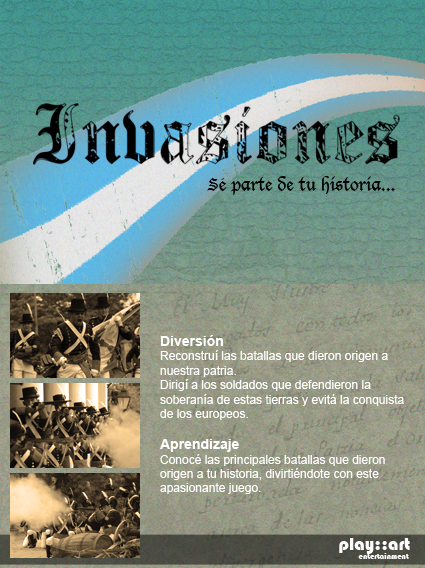
<style>
.page{position:relative;width:425px;height:568px}
.page>*{position:absolute;margin:0}
.t1{font:12px "ArialMT";color:#ffffff}
.t2{font:14px "Arial-BoldMT";color:#ffffff}
.t3{font:8px "Bauhaus93";color:#ffffff}
.t4{font:18px "Bauhaus93";color:#ffffff}
</style>
<div class="page">
<p class="t1" style="left:160px;top:335px;width:244px;height:159px"><span class="t2">Diversión<br></span>Reconstruí las batallas que dieron origen a <br>nuestra patria. <br>Dirigí a los soldados que defendieron la <br>soberanía de estas tierras y evitá la conquista<br>de los europeos. <br><br><span class="t2">Aprendizaje<br></span>Conocé las principales batallas que dieron <br>origen a tu historia, divirtiéndote con este <br>apasionante juego.</p>
<p class="t3" style="left:339px;top:538px;width:71px;height:21px"><span class="t4">play::art<br></span>          entertainment</p>
</div>
